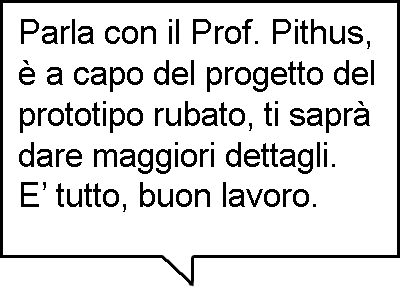
<style>
.page{position:relative;width:400px;height:300px;background:#ffffff}
.page>*{position:absolute;margin:0}
.t1{font:34px "ArialMT";color:#000000}
</style>
<div class="page">
<p class="t1" style="left:19px;top:19px;width:355px;height:193px">Parla con il Prof. Pithus,<br>è a capo del progetto del<br>prototipo rubato, ti saprà<br>dare maggiori dettagli.<br>E’ tutto, buon lavoro.</p>
</div>
